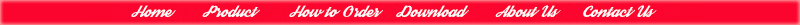
<style>
.page{position:relative;width:800px;height:25px;background:#fb042d}
.page>*{position:absolute;margin:0}
.t1{font:11.3px "Streetwear";color:#fdfcfc;scale:1.07 1}
</style>
<div class="page">
<p class="t1" style="left:131px;top:5px;width:45px;height:12px">Home</p>
<p class="t1" style="left:202px;top:5px;width:58px;height:12px">Product</p>
<p class="t1" style="left:289px;top:5px;width:94px;height:12px">How to Order</p>
<p class="t1" style="left:396px;top:5px;width:73px;height:12px">Download</p>
<p class="t1" style="left:495px;top:5px;width:66px;height:12px">About Us</p>
<p class="t1" style="left:583px;top:5px;width:74px;height:12px">Contact Us</p>
</div>
